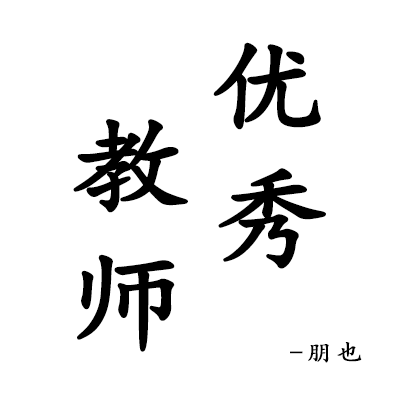
<style>
.page{position:relative;width:400px;height:400px;background:#ffffff}
.page>*{position:absolute;margin:0}
.t1{font:108px "KaiTi";letter-spacing:0.1em;color:#000000;font-weight:bold;scale:1.1 1}
.t2{font:24px "KaiTi";letter-spacing:0.1em;color:#000000;font-weight:bold;scale:1.1 1}
</style>
<div class="page">
<p class="t1" style="left:213px;top:42px;width:108px;height:88px">优</p>
<p class="t1" style="left:73px;top:119px;width:115px;height:94px">教</p>
<p class="t1" style="left:218px;top:168px;width:108px;height:101px">秀</p>
<p class="t1" style="left:77px;top:254px;width:98px;height:98px">师</p>
<p class="t2" style="left:290px;top:342px;width:72px;height:21px">-朋也</p>
</div>
